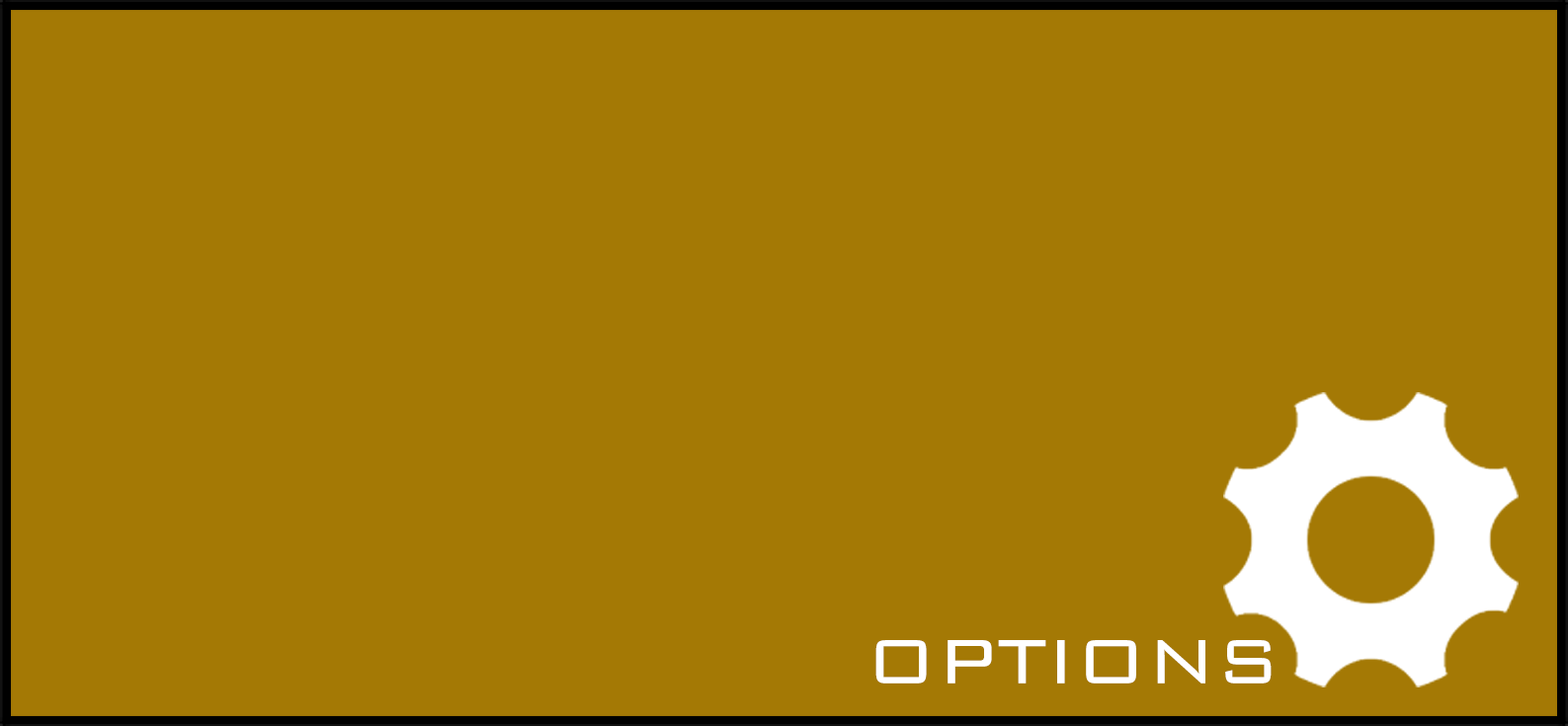
<style>
.page{position:relative;width:1568px;height:726px;background:#a47905}
.page>*{position:absolute;margin:0}
.t1{font:83.2px "BankGothic-Light";color:#ffffff}
</style>
<div class="page">
<p class="t1" style="left:875px;top:640px;width:397px;height:44px">OPTIONS</p>
</div>
